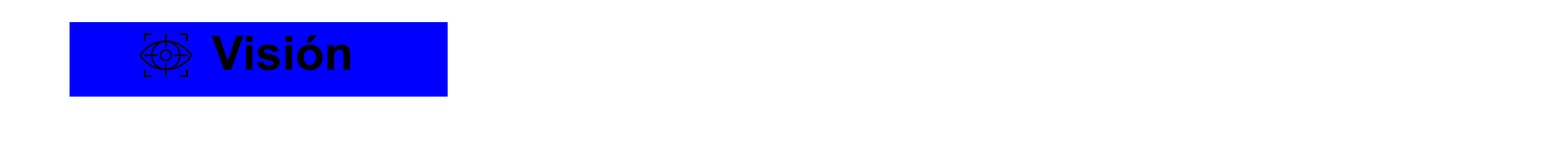
<style>
.page{position:relative;width:1568px;height:149px;background:#ffffff}
.page>*{position:absolute;margin:0}
.t1{font:47.4px "Arial-BoldMT";color:#000000}
</style>
<div class="page">
<p class="t1" style="left:211px;top:35px;width:139px;height:36px">Visión</p>
</div>
